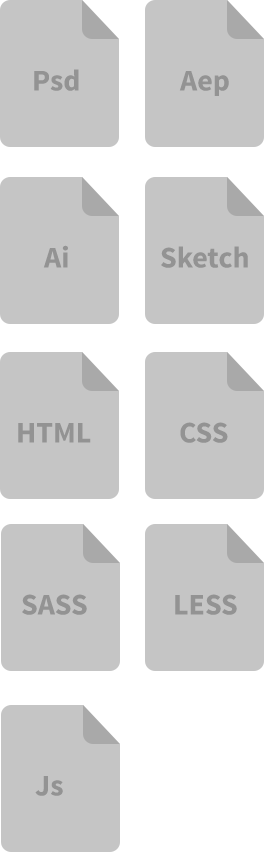
<style>
.page{position:relative;width:264px;height:852px;background:#c5c5c5}
.page>*{position:absolute;margin:0}
.t1{font:30px "SourceSansPro-Bold";color:#939393}
</style>
<div class="page">
<p class="t1" style="left:34px;top:69px;width:45px;height:22px">Psd</p>
<p class="t1" style="left:179px;top:71px;width:50px;height:25px">Aep</p>
<p class="t1" style="left:43px;top:245px;width:25px;height:23px">Ai</p>
<p class="t1" style="left:161px;top:246px;width:87px;height:22px">Sketch</p>
<p class="t1" style="left:18px;top:423px;width:73px;height:20px">HTML</p>
<p class="t1" style="left:180px;top:422px;width:48px;height:21px">CSS</p>
<p class="t1" style="left:22px;top:594px;width:65px;height:21px">SASS</p>
<p class="t1" style="left:175px;top:594px;width:62px;height:21px">LESS</p>
<p class="t1" style="left:35px;top:776px;width:28px;height:20px">Js</p>
</div>
